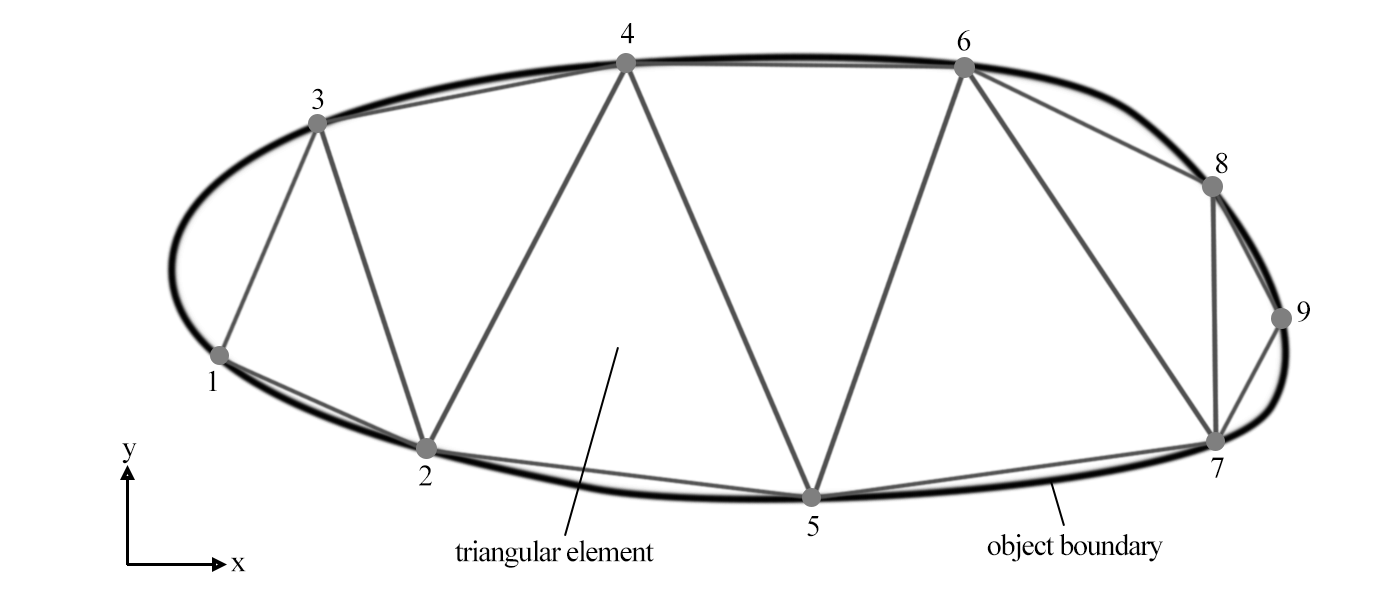
<style>
.page{position:relative;width:1400px;height:600px;background:#ffffff}
.page>*{position:absolute;margin:0}
.t1{font:30px "TimesNewRomanPSMT";letter-spacing:-0.04em;color:#000000}
</style>
<div class="page">
<p class="t1" style="left:621px;top:23px;width:13px;height:21px">4</p>
<p class="t1" style="left:957px;top:30px;width:14px;height:21px">6</p>
<p class="t1" style="left:312px;top:88px;width:12px;height:22px">3</p>
<p class="t1" style="left:1216px;top:152px;width:12px;height:22px">8</p>
<p class="t1" style="left:1297px;top:301px;width:13px;height:21px">9</p>
<p class="t1" style="left:208px;top:370px;width:9px;height:21px">1</p>
<p class="t1" style="left:122px;top:443px;width:15px;height:21px">y</p>
<p class="t1" style="left:1211px;top:457px;width:13px;height:21px">7</p>
<p class="t1" style="left:419px;top:465px;width:13px;height:21px">2</p>
<p class="t1" style="left:807px;top:516px;width:12px;height:21px">5</p>
<p class="t1" style="left:987px;top:534px;width:176px;height:28px">object boundary</p>
<p class="t1" style="left:455px;top:540px;width:199px;height:28px">triangular element</p>
<p class="t1" style="left:231px;top:557px;width:15px;height:15px">x</p>
</div>
